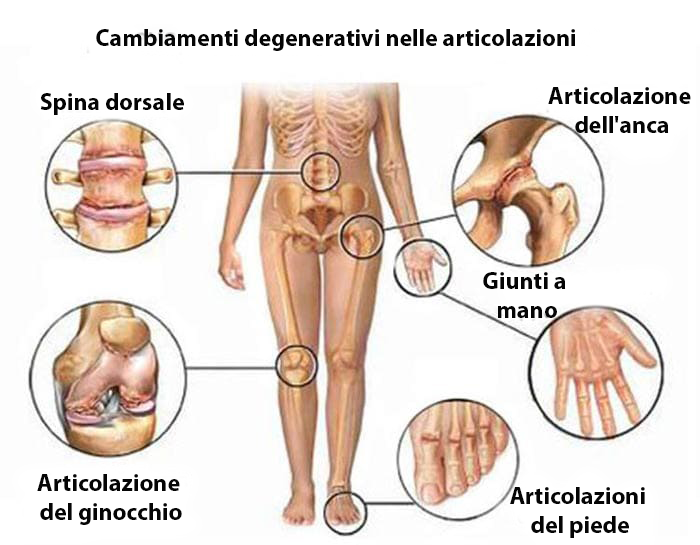
<style>
.page{position:relative;width:700px;height:545px;background:#ffffff}
.page>*{position:absolute;margin:0}
.t1{font:24px "MyriadPro-Bold";color:#050505}
</style>
<div class="page">
<p class="t1" style="left:96px;top:29px;width:479px;height:22px">Cambiamenti degenerativi nelle articolazioni</p>
<p class="t1" style="left:548px;top:87px;width:143px;height:46px;text-align:center">Articolazione <br>dell'anca</p>
<p class="t1" style="left:40px;top:93px;width:144px;height:22px">Spina dorsale</p>
<p class="t1" style="left:483px;top:272px;width:83px;height:46px;text-align:center">Giunti a <br>mano</p>
<p class="t1" style="left:37px;top:474px;width:145px;height:51px;text-align:center">Articolazione <br>del ginocchio</p>
<p class="t1" style="left:510px;top:487px;width:135px;height:51px;text-align:center">Articolazioni <br>del piede</p>
</div>
